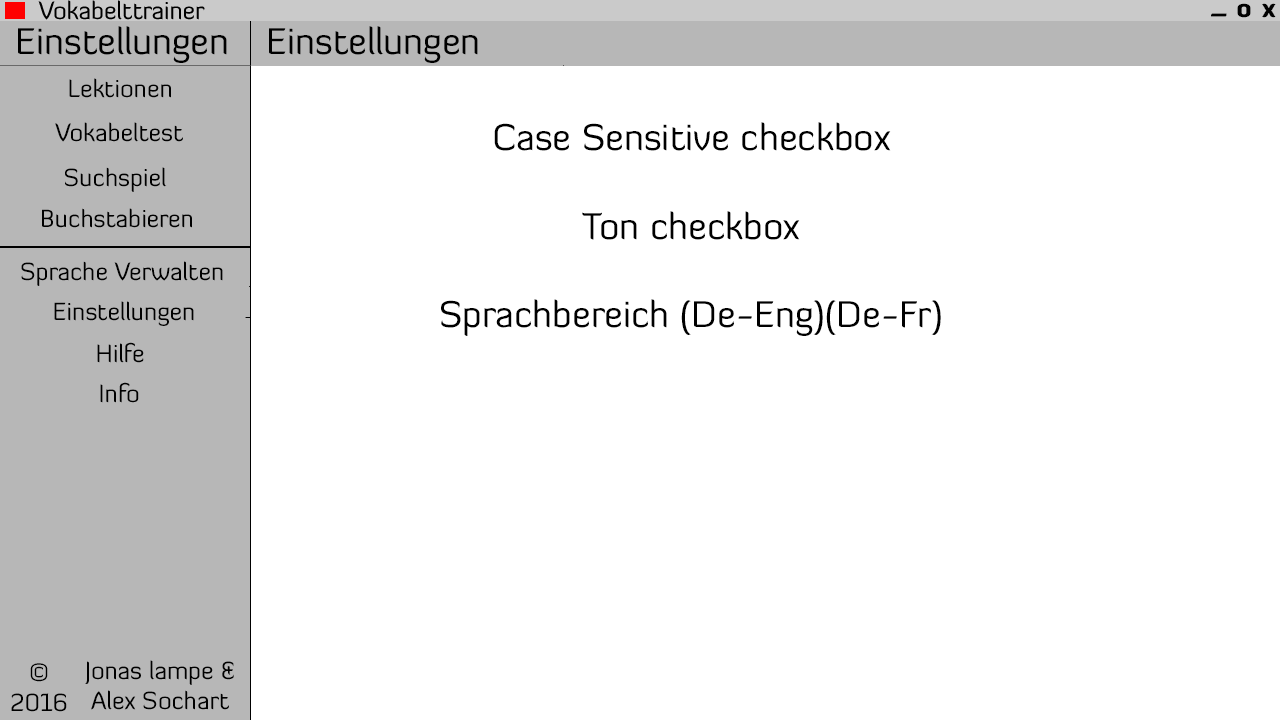
<style>
.page{position:relative;width:1280px;height:720px;background:#ffffff}
.page>*{position:absolute;margin:0}
.t1{font:24.6px "DiavloBlack-Regular";color:#000000}
.t2{font:36.9px "DiavloBook-Regular";color:#000000}
.t3{font:24.6px "DiavloBook-Regular";color:#000000}
</style>
<div class="page">
<p class="t1" style="left:1237px;top:3px;width:14px;height:15px">o</p>
<p class="t1" style="left:1262px;top:3px;width:14px;height:15px">x</p>
<p class="t1" style="left:1211px;top:13px;width:16px;height:4px">_</p>
<p class="t2" style="left:18px;top:26px;width:209px;height:37px">Einstellungen</p>
<p class="t2" style="left:269px;top:26px;width:209px;height:37px">Einstellungen</p>
<p class="t3" style="left:69px;top:78px;width:102px;height:20px">Lektionen</p>
<p class="t3" style="left:55px;top:122px;width:128px;height:20px">Vokabeltest</p>
<p class="t2" style="left:441px;top:122px;width:500px;height:214px;text-align:center">Case Sensitive checkbox<br><br>Ton checkbox<br><br>Sprachbereich (De-Eng)(De-Fr)</p>
<p class="t3" style="left:65px;top:167px;width:102px;height:25px">Suchspiel</p>
<p class="t3" style="left:42px;top:208px;width:150px;height:20px">Buchstabieren</p>
<p class="t3" style="left:21px;top:261px;width:202px;height:25px">Sprache Verwalten</p>
<p class="t3" style="left:54px;top:301px;width:140px;height:25px">Einstellungen</p>
<p class="t3" style="left:97px;top:342px;width:47px;height:21px">Hilfe</p>
<p class="t3" style="left:100px;top:382px;width:39px;height:21px">Info</p>
<p class="t3" style="left:11px;top:663px;width:56px;height:49px;text-align:center">©<br>2016</p>
<p class="t3" style="left:85px;top:660px;width:149px;height:50px;text-align:center">Jonas lampe &amp;<br>Alex Sochart</p>
</div>
